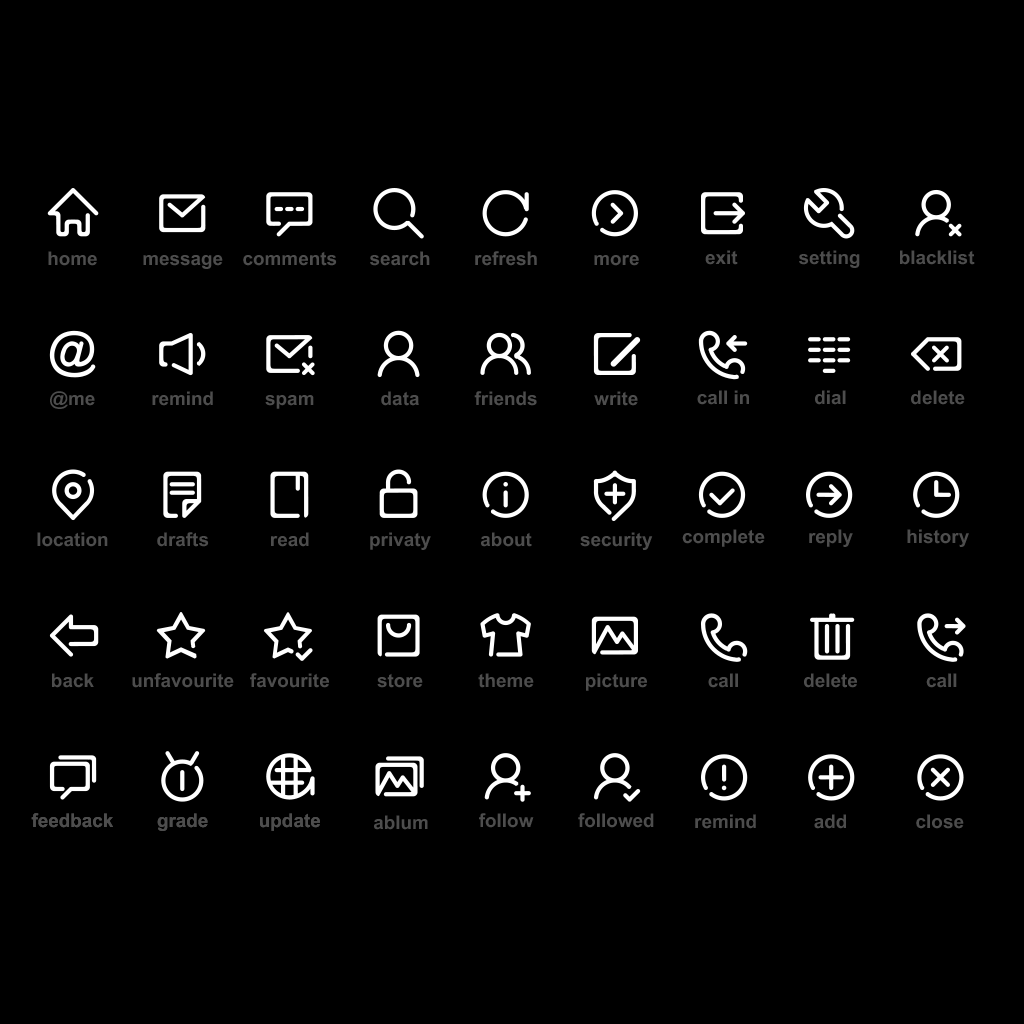
<style>
.page{position:relative;width:1024px;height:1024px;background:#000000}
.page>*{position:absolute;margin:0}
.t1{font:18.9px "CHei2TGB-Xbold";color:#4d4d4d}
.t2{font:18.9px "CHei2GB-Xbold";color:#4d4d4d}
</style>
<div class="page">
<p class="t1" style="left:48px;top:251px;width:49px;height:15px">home</p>
<p class="t1" style="left:143px;top:255px;width:80px;height:14px">message</p>
<p class="t1" style="left:243px;top:251px;width:94px;height:15px">comments</p>
<p class="t1" style="left:370px;top:251px;width:60px;height:15px">search</p>
<p class="t1" style="left:475px;top:251px;width:62px;height:15px">refresh</p>
<p class="t1" style="left:594px;top:255px;width:45px;height:11px">more</p>
<p class="t1" style="left:705px;top:250px;width:33px;height:15px">exit</p>
<p class="t1" style="left:799px;top:250px;width:61px;height:18px">setting</p>
<p class="t1" style="left:900px;top:250px;width:75px;height:15px">blacklist</p>
<p class="t2" style="left:697px;top:390px;width:52px;height:15px">call in</p>
<p class="t1" style="left:815px;top:390px;width:31px;height:15px">dial</p>
<p class="t1" style="left:911px;top:390px;width:54px;height:15px">delete</p>
<p class="t1" style="left:50px;top:391px;width:45px;height:18px">@me</p>
<p class="t1" style="left:152px;top:391px;width:61px;height:15px">remind</p>
<p class="t1" style="left:265px;top:395px;width:49px;height:14px">spam</p>
<p class="t1" style="left:381px;top:391px;width:38px;height:15px">data</p>
<p class="t1" style="left:474px;top:391px;width:63px;height:15px">friends</p>
<p class="t1" style="left:594px;top:391px;width:44px;height:15px">write</p>
<p class="t1" style="left:37px;top:532px;width:71px;height:15px">location</p>
<p class="t1" style="left:157px;top:532px;width:52px;height:15px">drafts</p>
<p class="t1" style="left:271px;top:532px;width:38px;height:15px">read</p>
<p class="t1" style="left:370px;top:532px;width:61px;height:18px">privaty</p>
<p class="t1" style="left:481px;top:532px;width:51px;height:15px">about</p>
<p class="t1" style="left:580px;top:532px;width:73px;height:18px">security</p>
<p class="t1" style="left:682px;top:529px;width:83px;height:18px">complete</p>
<p class="t1" style="left:809px;top:529px;width:44px;height:18px">reply</p>
<p class="t1" style="left:907px;top:529px;width:62px;height:18px">history</p>
<p class="t1" style="left:52px;top:673px;width:42px;height:15px">back</p>
<p class="t1" style="left:132px;top:673px;width:102px;height:15px">unfavourite</p>
<p class="t1" style="left:250px;top:673px;width:79px;height:15px">favourite</p>
<p class="t1" style="left:377px;top:673px;width:46px;height:15px">store</p>
<p class="t1" style="left:478px;top:673px;width:56px;height:15px">theme</p>
<p class="t1" style="left:586px;top:673px;width:61px;height:18px">picture</p>
<p class="t1" style="left:708px;top:673px;width:30px;height:15px">call</p>
<p class="t2" style="left:804px;top:673px;width:53px;height:15px">delete</p>
<p class="t2" style="left:926px;top:673px;width:31px;height:15px">call</p>
<p class="t1" style="left:31px;top:813px;width:82px;height:15px">feedback</p>
<p class="t1" style="left:31px;top:813px;width:82px;height:15px">feedback</p>
<p class="t1" style="left:157px;top:813px;width:51px;height:18px">grade</p>
<p class="t1" style="left:157px;top:813px;width:51px;height:18px">grade</p>
<p class="t1" style="left:260px;top:813px;width:60px;height:18px">update</p>
<p class="t1" style="left:260px;top:813px;width:60px;height:18px">update</p>
<p class="t1" style="left:374px;top:815px;width:54px;height:15px">ablum</p>
<p class="t1" style="left:479px;top:813px;width:55px;height:15px">follow</p>
<p class="t1" style="left:578px;top:813px;width:76px;height:15px">followed</p>
<p class="t2" style="left:695px;top:814px;width:61px;height:15px">remind</p>
<p class="t1" style="left:814px;top:814px;width:32px;height:15px">add</p>
<p class="t1" style="left:916px;top:814px;width:48px;height:15px">close</p>
</div>
